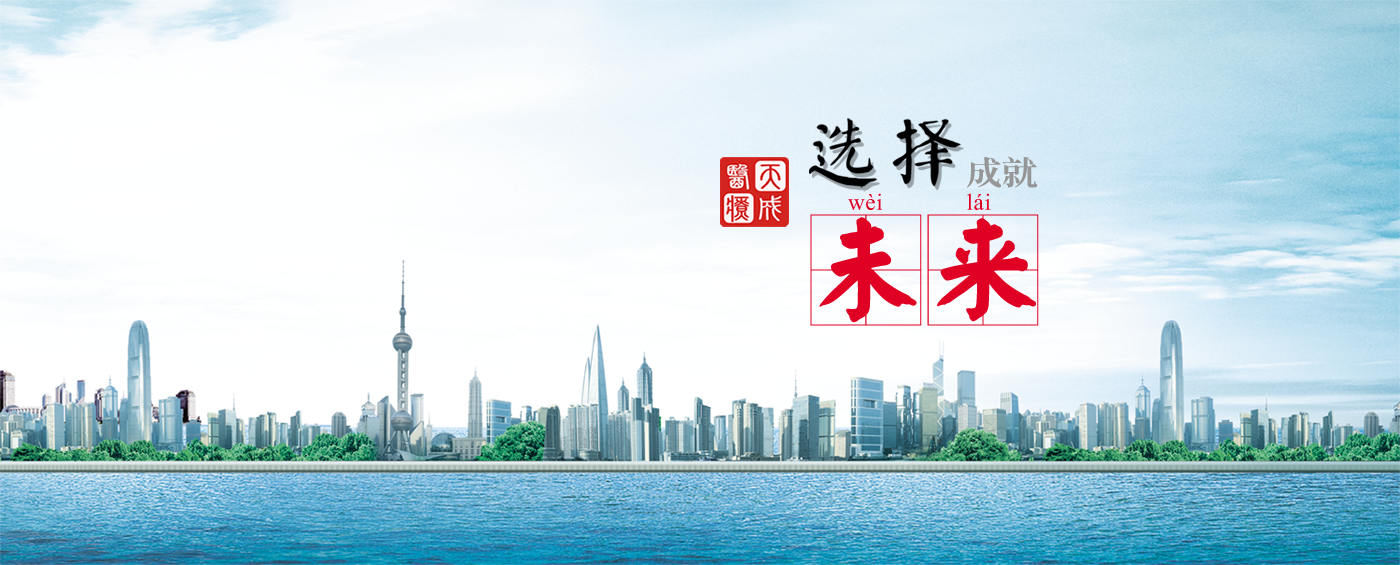
<style>
.page{position:relative;width:1400px;height:565px}
.page>*{position:absolute;margin:0}
.t1{font:77.7px "øów·»îów©I";letter-spacing:0.08em;color:#000000}
.t2{font:32.4px "GBInnMing-Heavy";color:#969696;scale:1.11 1}
.t3{font:30px "Kokila";letter-spacing:0.02em;color:#df0023}
.t4{font:111.6px "YankaigungEG-Ultra-GB";letter-spacing:0.05em;color:#df0023}
</style>
<div class="page">
<p class="t1" style="left:809px;top:118px;width:152px;height:70px">选择</p>
<p class="t2" style="left:967px;top:156px;width:71px;height:32px">成就</p>
<p class="t3" style="left:848px;top:193px;width:143px;height:17px">wèi             lái</p>
<p class="t4" style="left:810px;top:214px;width:229px;height:112px">未来</p>
</div>
